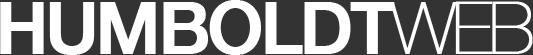
<style>
.page{position:relative;width:533px;height:55px;background:#333333}
.page>*{position:absolute;margin:0}
.t1{font:72px "HelveticaNeue-Medium";letter-spacing:-0.05em;color:#ffffff;font-weight:bold}
.t2{font:72px "HelveticaNeue-UltraLight";letter-spacing:-0.05em;color:#ffffff;font-weight:bold}
</style>
<div class="page">
<p class="t1" style="left:0px;top:0px;width:533px;height:55px">HUMBOLDT<span class="t2">WEB</span></p>
</div>
